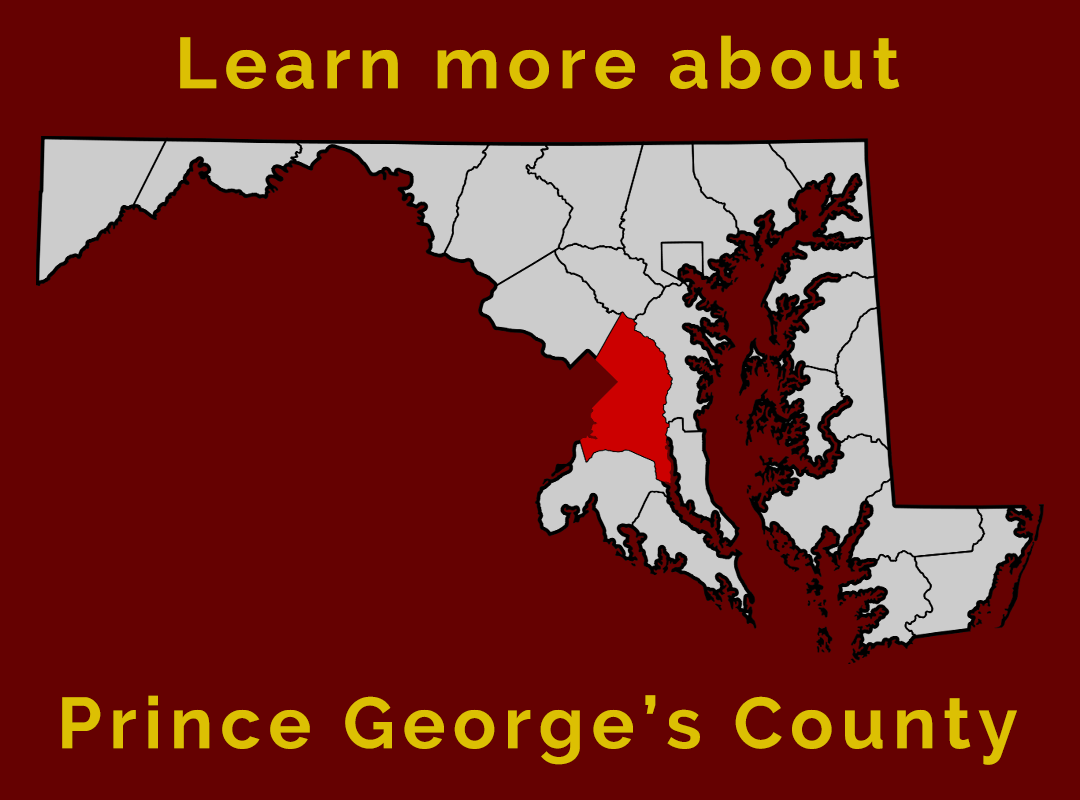
<style>
.page{position:relative;width:1080px;height:800px;background:#650101}
.page>*{position:absolute;margin:0}
.t1{font:72px "Raleway-Bold";letter-spacing:0.1em;color:#dcc003}
</style>
<div class="page">
<p class="t1" style="left:180px;top:35px;width:720px;height:54px">Learn more about</p>
<p class="t1" style="left:62px;top:695px;width:955px;height:70px">Prince George’s County</p>
</div>
